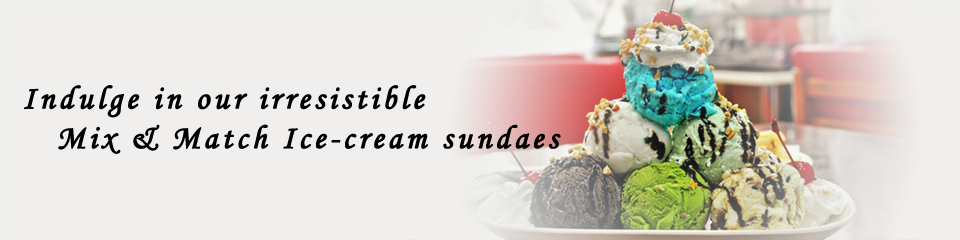
<style>
.page{position:relative;width:960px;height:240px;background:#f0efed}
.page>*{position:absolute;margin:0}
.t1{font:33px "MonotypeCorsiva";letter-spacing:0.1em;color:#000000;font-weight:bold}
</style>
<div class="page">
<p class="t1" style="left:24px;top:85px;width:537px;height:69px">Indulge in our irresistible<br>   Mix &amp; Match Ice-cream sundaes</p>
</div>
